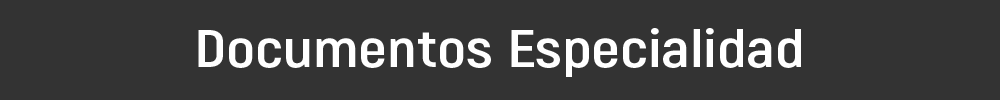
<style>
.page{position:relative;width:1000px;height:100px;background:#333333}
.page>*{position:absolute;margin:0}
.t1{font:52.9px "Akrobat-Bold";color:#ffffff;scale:1.2 1}
</style>
<div class="page">
<p class="t1" style="left:198px;top:28px;width:603px;height:49px">Documentos Especialidad</p>
</div>
